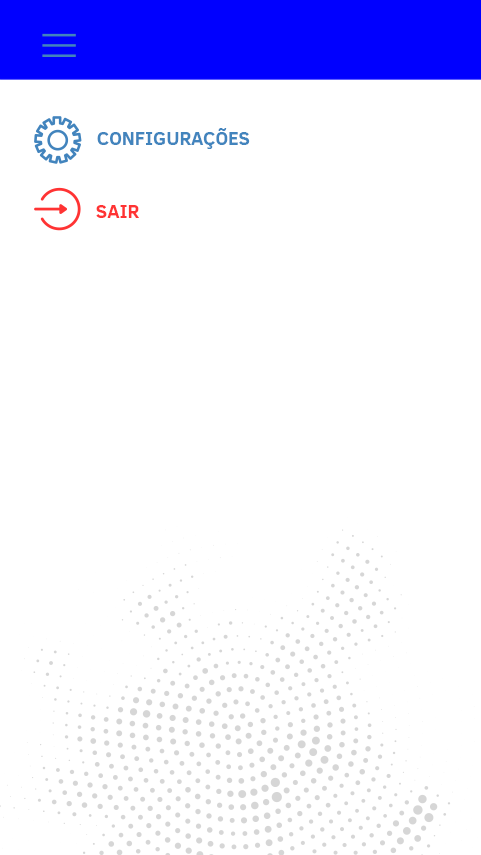
<style>
.page{position:relative;width:481px;height:855px;background:#ffffff}
.page>*{position:absolute;margin:0}
.t1{font:18.9px "ClearSans-Bold";color:#4284bd}
.t2{font:18.9px "ClearSans-Bold";color:#ff3333}
</style>
<div class="page">
<p class="t1" style="left:97px;top:128px;width:153px;height:21px">CONFIGURAÇÕES</p>
<p class="t2" style="left:96px;top:205px;width:43px;height:13px">SAIR</p>
</div>
